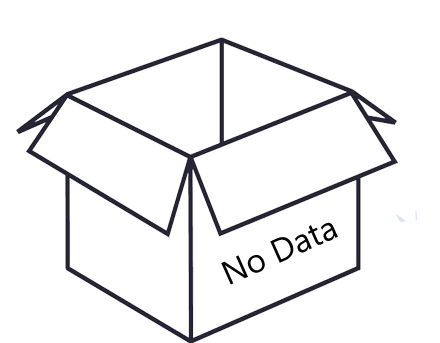
<style>
.page{position:relative;width:440px;height:343px;background:#ffffff}
.page>*{position:absolute;margin:0}
.t1{font:33.5px "SegoeUIHistoric";color:#040404}
</style>
<div class="page">
<p class="t1" style="left:221px;top:222px;width:117px;height:63px;rotate:-24deg">No Data</p>
</div>
